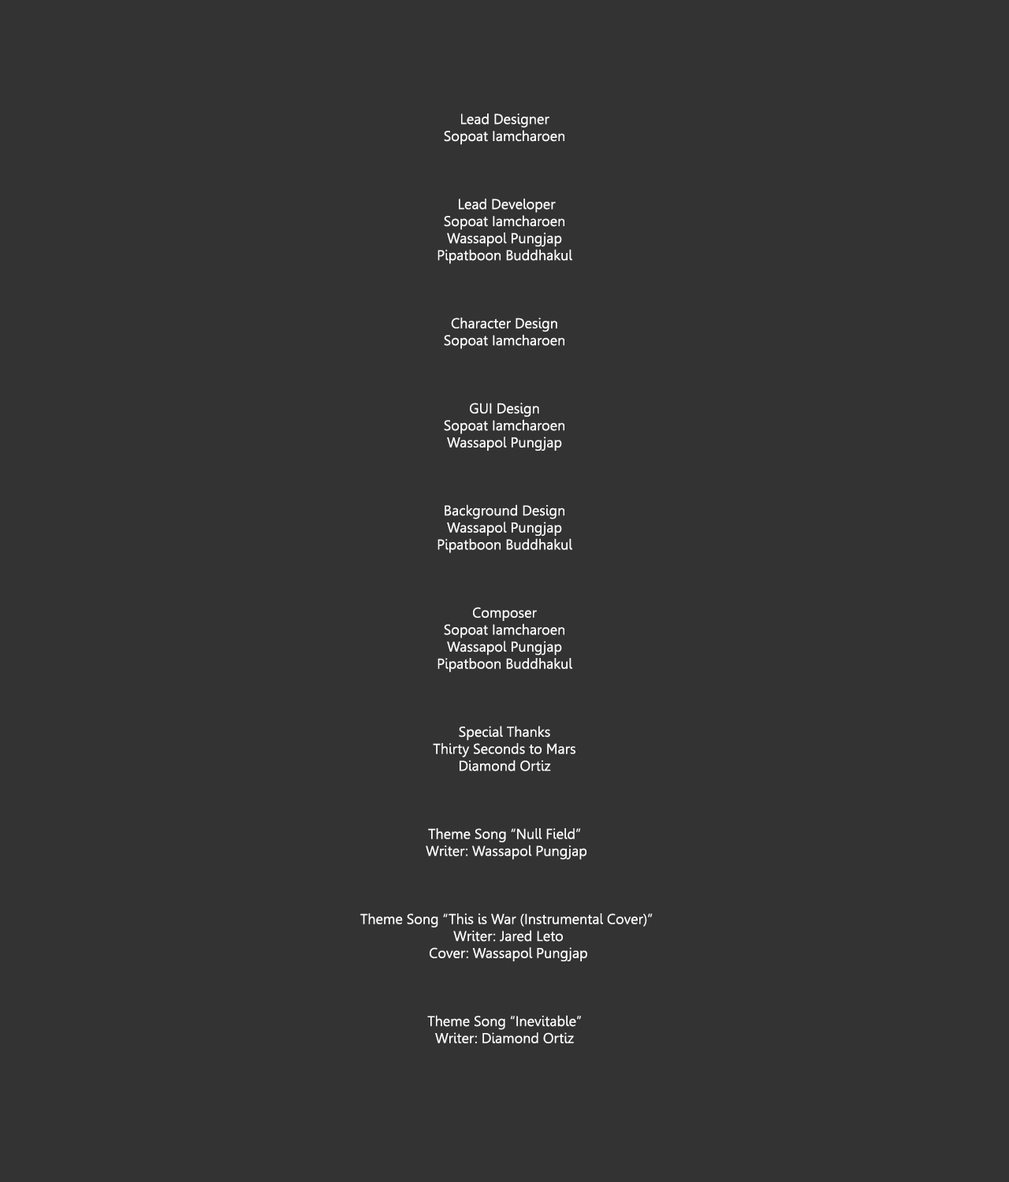
<style>
.page{position:relative;width:1009px;height:1182px;background:#333333}
.page>*{position:absolute;margin:0}
.t1{font:14.2px "Leelawadee";color:#ffffff}
</style>
<div class="page">
<p class="t1" style="left:360px;top:113px;width:293px;height:930px;text-align:center">Lead Designer<br>Sopoat Iamcharoen<br><br><br><br> Lead Developer<br>Sopoat Iamcharoen<br>Wassapol Pungjap<br>Pipatboon Buddhakul<br><br><br><br>Character Design<br>Sopoat Iamcharoen<br><br><br><br>GUI Design<br>Sopoat Iamcharoen<br>Wassapol Pungjap<br><br><br><br>Background Design<br>Wassapol Pungjap<br>Pipatboon Buddhakul<br><br><br><br>Composer<br>Sopoat Iamcharoen<br>Wassapol Pungjap<br>Pipatboon Buddhakul<br><br><br><br>Special Thanks<br>Thirty Seconds to Mars<br>Diamond Ortiz<br><br><br><br>Theme Song “Null Field”<br> Writer: Wassapol Pungjap<br><br><br><br> Theme Song “This is War (Instrumental Cover)”<br>  Writer: Jared Leto<br>  Cover: Wassapol Pungjap<br><br><br><br>Theme Song “Inevitable”<br>Writer: Diamond Ortiz</p>
</div>
